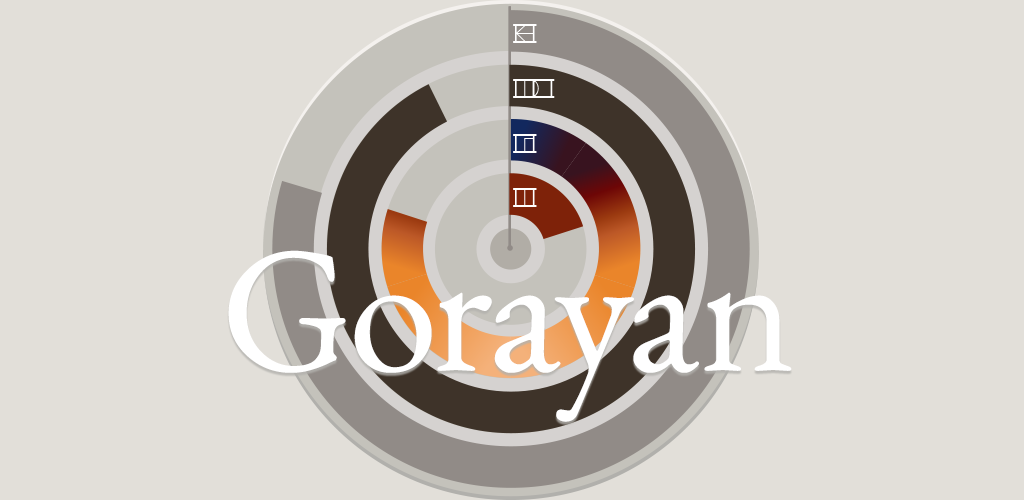
<style>
.page{position:relative;width:1024px;height:500px;background:#e2dfd9}
.page>*{position:absolute;margin:0}
.t1{font:180px "EBGaramond";color:#ffffff}
</style>
<div class="page">
<p class="t1" style="left:228px;top:250px;width:564px;height:172px">Gorayan</p>
</div>
